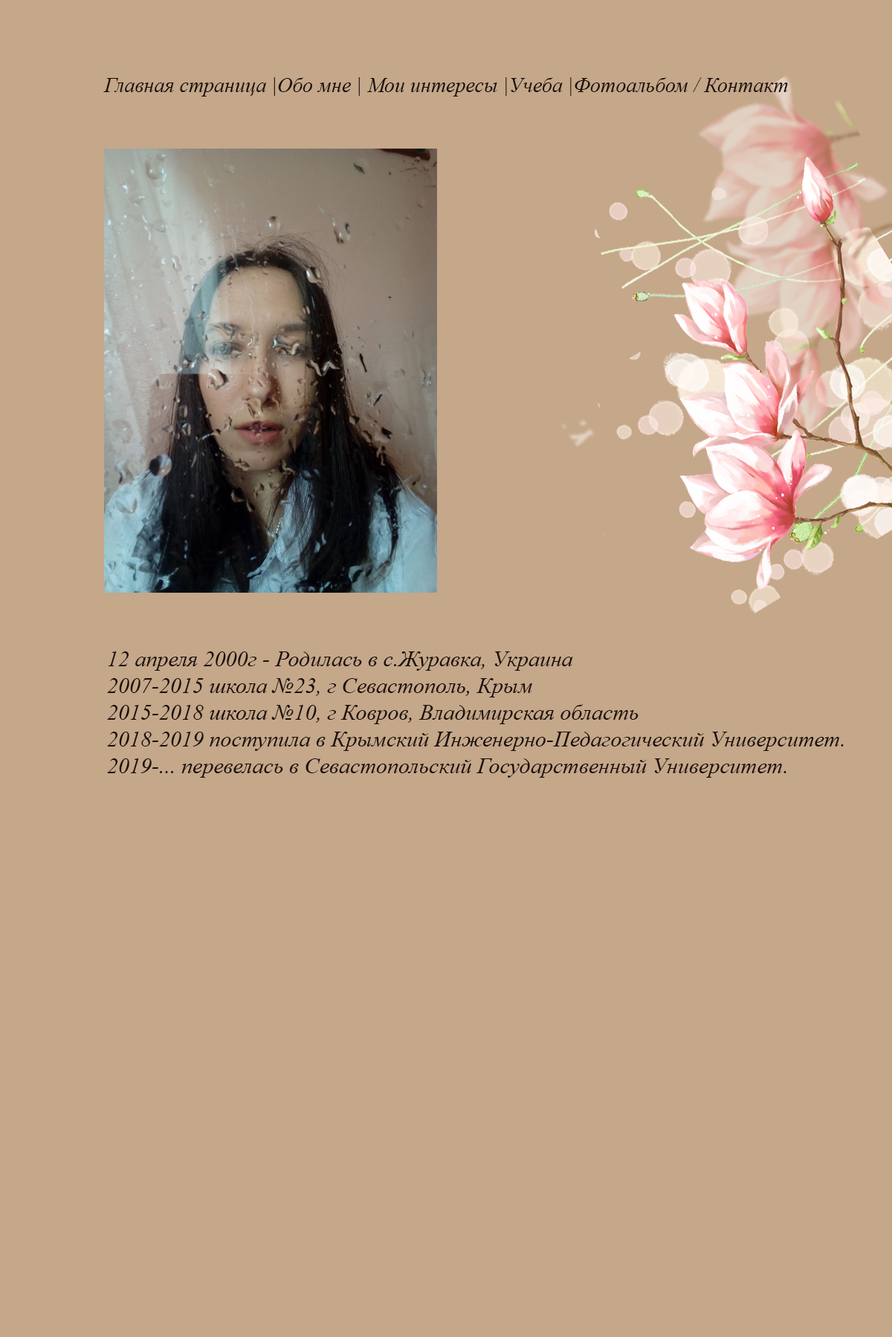
<style>
.page{position:relative;width:892px;height:1337px;background:#c5a78a}
.page>*{position:absolute;margin:0}
.t1{font:20.8px "TimesNewRomanPS-ItalicMT";color:#19100b}
.t2{font:22.3px "TimesNewRomanPS-ItalicMT";color:#19100b}
</style>
<div class="page">
<p class="t1" style="left:103px;top:77px;width:685px;height:20px">Главная страница |Обо мне | Мои интересы |Учеба |Фотоальбом / Контакт</p>
<p class="t2" style="left:107px;top:652px;width:736px;height:126px;text-align:right">12 апреля 2000г - Родилась в с.Журавка, Украина <br>2007-2015 школа №23, г Севастополь, Крым<br>2015-2018 школа №10, г Ковров, Владимирская область<br>2018-2019 поступила в Крымский Инженерно-Педагогический Университет.<br>2019-... перевелась в Севастопольский Государственный Университет.</p>
</div>
